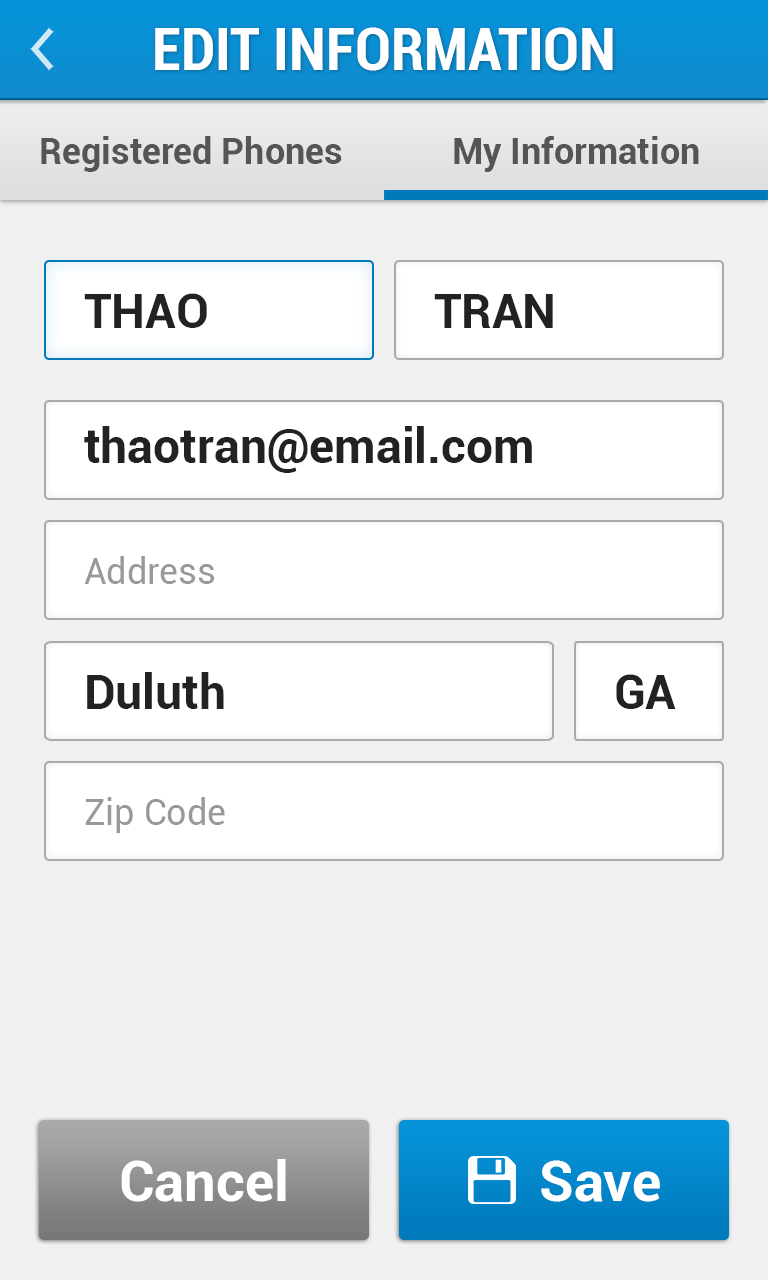
<style>
.page{position:relative;width:768px;height:1280px;background:#f0f0f0}
.page>*{position:absolute;margin:0}
.t1{font:60px "Roboto-BoldCondensed";color:#ffffff}
.t2{font:36px "Roboto-Bold";color:#555555}
.t3{font:48px "Roboto-Bold";color:#222222}
.t4{font:36px "Roboto-Regular";color:#999999}
.t5{font:56px "Roboto-Bold";color:#ffffff}
</style>
<div class="page">
<p class="t1" style="left:155px;top:27px;width:458px;height:44px">EDIT INFORMATION</p>
<p class="t2" style="left:41px;top:136px;width:301px;height:36px">Registered Phones</p>
<p class="t2" style="left:454px;top:136px;width:245px;height:36px">My Information</p>
<p class="t3" style="left:84px;top:293px;width:123px;height:35px">THAO</p>
<p class="t3" style="left:434px;top:294px;width:119px;height:34px">TRAN</p>
<p class="t3" style="left:84px;top:426px;width:448px;height:47px">thaotran@email.com</p>
<p class="t4" style="left:84px;top:556px;width:130px;height:28px">Address</p>
<p class="t3" style="left:87px;top:672px;width:137px;height:37px">Duluth</p>
<p class="t3" style="left:616px;top:674px;width:60px;height:35px">GA</p>
<p class="t4" style="left:85px;top:797px;width:140px;height:36px">Zip Code</p>
<p class="t5" style="left:121px;top:1159px;width:165px;height:43px">Cancel</p>
<p class="t5" style="left:541px;top:1160px;width:119px;height:42px">Save</p>
</div>
